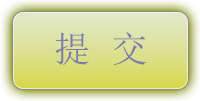
<style>
.page{position:relative;width:200px;height:101px}
.page>*{position:absolute;margin:0}
.t1{font:36px "SimSun";letter-spacing:0.05em;color:#7c79ac}
</style>
<div class="page">
<p class="t1" style="left:55px;top:32px;width:91px;height:34px">提 交</p>
</div>
